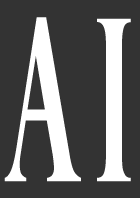
<style>
.page{position:relative;width:140px;height:198px;background:#333333}
.page>*{position:absolute;margin:0}
.t1{font:225.5px "PerpetuaTitlingMT-Bold";letter-spacing:0.14em;color:#ffffff;scale:0.44 1}
</style>
<div class="page">
<p class="t1" style="left:4px;top:17px;width:127px;height:165px">ai</p>
</div>
